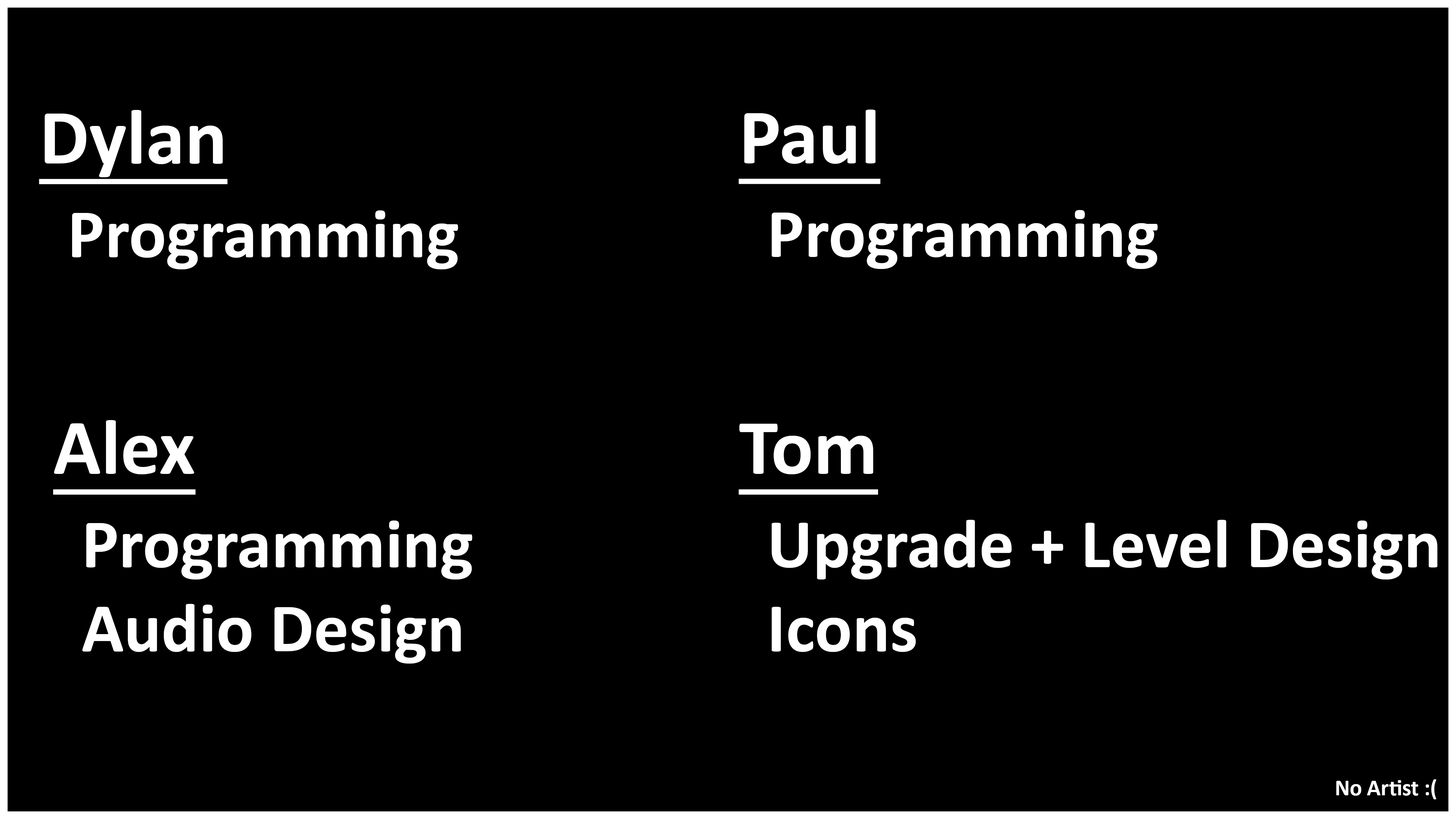
<style>
.page{position:relative;width:1456px;height:819px;background:#000000}
.page>*{position:absolute;margin:0}
.t1{font:79.1px "Calibri-Bold";color:#ffffff;text-decoration:underline}
.t2{font:70px "Calibri-Bold";color:#ffffff}
.t3{font:22.7px "Calibri-Bold";color:#ffffff}
</style>
<div class="page">
<p class="t1" style="left:39px;top:110px;width:188px;height:74px">Dylan</p>
<p class="t1" style="left:739px;top:110px;width:142px;height:74px">Paul</p>
<p class="t2" style="left:72px;top:210px;width:386px;height:59px">Programming</p>
<p class="t2" style="left:772px;top:210px;width:386px;height:59px">Programming</p>
<p class="t1" style="left:53px;top:420px;width:143px;height:75px">Alex</p>
<p class="t1" style="left:739px;top:424px;width:139px;height:71px">Tom</p>
<p class="t2" style="left:82px;top:521px;width:390px;height:143px;text-align:justify">Programming<br>Audio Design</p>
<p class="t2" style="left:772px;top:520px;width:665px;height:132px;text-align:justify">Upgrade + Level Design<br>Icons</p>
<p class="t3" style="left:1336px;top:779px;width:100px;height:20px">No Artist :(</p>
</div>
